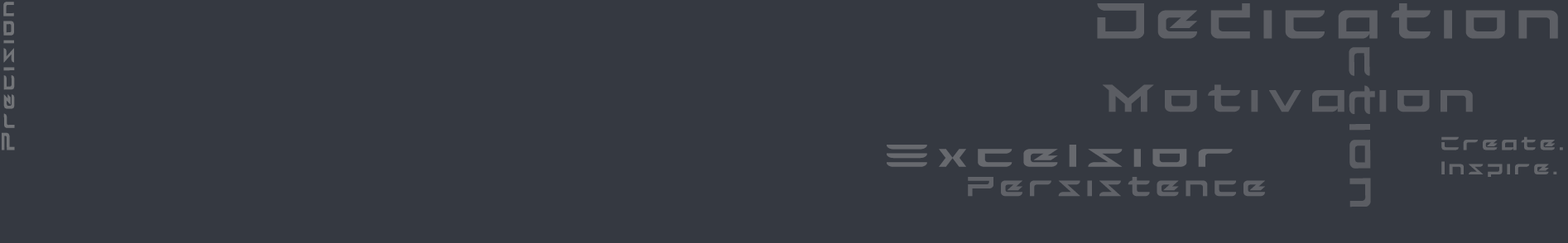
<style>
.page{position:relative;width:1568px;height:243px;background:#353941}
.page>*{position:absolute;margin:0}
.t1{font:20.4px "TESLA";letter-spacing:0.1em;color:#727478;scale:1.11 1}
.t2{font:56px "TESLA";letter-spacing:0.1em;color:#5d5f65;scale:1.11 1}
.t3{font:40.7px "TESLA";letter-spacing:0.1em;color:#5b5d63;scale:1.11 1}
.t4{font:42.9px "TESLA";letter-spacing:0.1em;color:#5b5d63;scale:1.18 1}
.t5{font:20.4px "TESLA";letter-spacing:0.1em;color:#65676c;scale:1.11 1}
.t6{font:35.3px "TESLA";letter-spacing:0.1em;color:#67696e;scale:1.52 1}
.t7{font:30.6px "TESLA";letter-spacing:0.1em;color:#606268;scale:1.11 1}
</style>
<div class="page">
<p class="t1" style="left:2px;top:2px;width:13px;height:149px;rotate:-90deg">Precision</p>
<p class="t2" style="left:1097px;top:3px;width:461px;height:36px">Dedication</p>
<p class="t3" style="left:1349px;top:47px;width:26px;height:161px;rotate:90deg">ction</p>
<p class="t4" style="left:1102px;top:84px;width:371px;height:29px">Motiva ion</p>
<p class="t5" style="left:1441px;top:137px;width:122px;height:40px">Create. Inspire.</p>
<p class="t6" style="left:887px;top:145px;width:346px;height:22px">Excelsior</p>
<p class="t7" style="left:968px;top:177px;width:297px;height:20px">Persistence</p>
</div>
